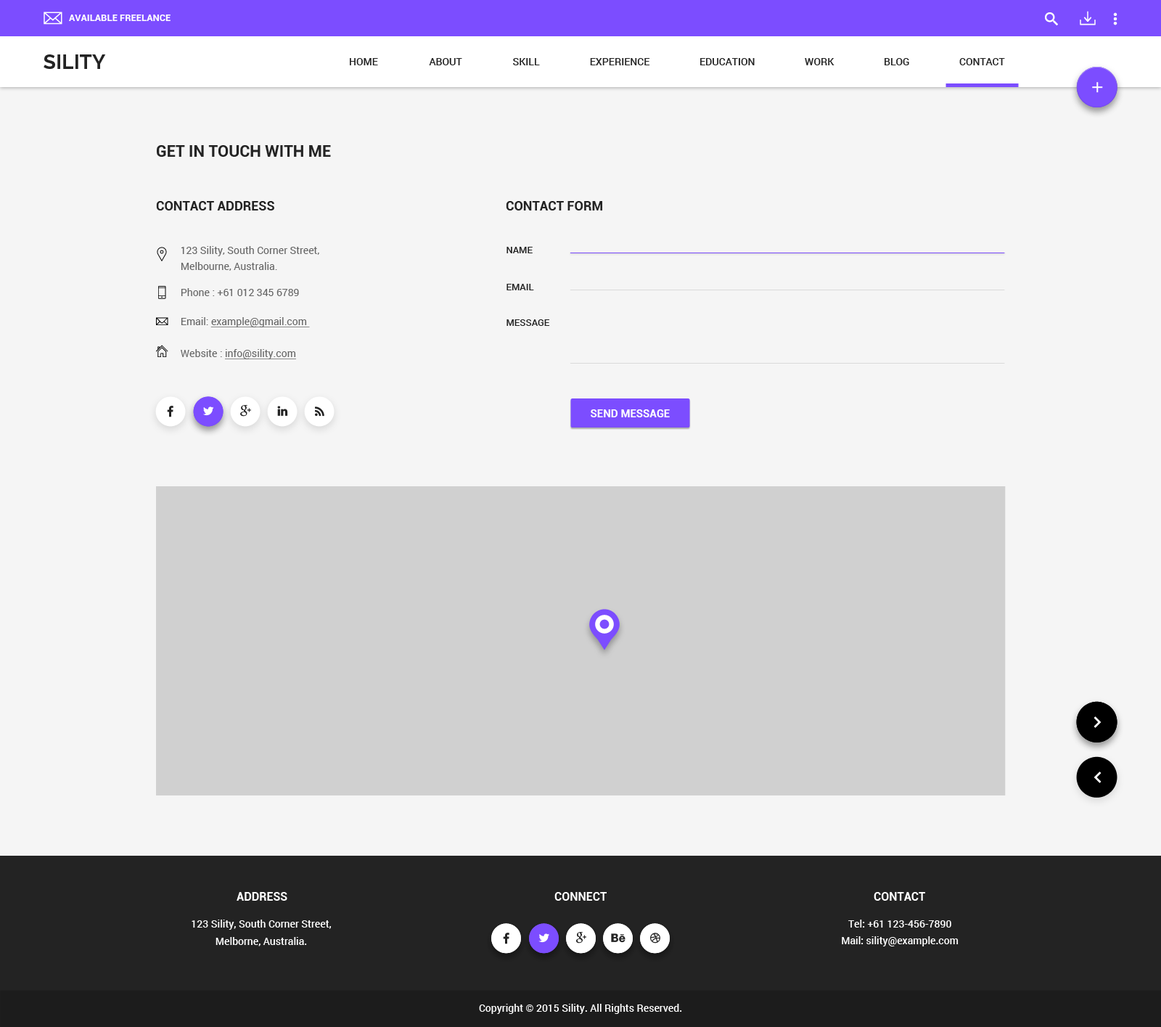
<style>
.page{position:relative;width:1161px;height:1027px;background:#f5f5f5}
.page>*{position:absolute;margin:0}
.t1{font:9.4px "Roboto-Bold";color:#ffffff;text-transform:uppercase}
.t2{font:20.3px "Raleway-Bold";color:#232323}
.t3{font:10.2px "Roboto-Medium";color:#232323;text-transform:uppercase}
.t4{font:16px "Roboto-Bold";color:#232323}
.t5{font:13.1px "Roboto-Bold";color:#232323}
.t6{font:10.2px/16px "Roboto-Regular";color:#666666}
.t7{font:9.4px "Roboto-Medium";color:#232323}
.t8{font:10.2px "Roboto-Regular";color:#666666}
.t9{font:10.2px "Roboto-Regular";color:#666666;text-decoration:underline}
.t10{font:10.9px "Roboto-Bold";color:#ffffff}
.t11{font:11.6px "Roboto-Bold";color:#ffffff;text-transform:uppercase}
.t12{font:10.2px/17.4px "Roboto-Medium";color:#ffffff}
.t13{font:10.2px "Roboto-Medium";color:#ffffff}
</style>
<div class="page">
<p class="t1" style="left:69px;top:15px;width:102px;height:6px">available freelance</p>
<p class="t2" style="left:44px;top:54px;width:62px;height:15px">SILITY</p>
<p class="t3" style="left:350px;top:58px;width:28px;height:7px">home</p>
<p class="t3" style="left:429px;top:58px;width:33px;height:7px">about</p>
<p class="t3" style="left:513px;top:58px;width:27px;height:7px">skill</p>
<p class="t3" style="left:590px;top:58px;width:60px;height:7px">experience</p>
<p class="t3" style="left:700px;top:58px;width:55px;height:7px">education</p>
<p class="t3" style="left:805px;top:58px;width:30px;height:7px">work</p>
<p class="t3" style="left:885px;top:58px;width:24px;height:7px">blog</p>
<p class="t3" style="left:959px;top:58px;width:46px;height:7px">Contact</p>
<p class="t4" style="left:157px;top:145px;width:174px;height:12px">GET IN TOUCH WITH ME</p>
<p class="t5" style="left:156px;top:201px;width:118px;height:9px">CONTACT ADDRESS</p>
<p class="t5" style="left:506px;top:201px;width:96px;height:9px">CONTACT FORM</p>
<p class="t6" style="left:181px;top:246px;width:138px;height:25px">123 Sility, South Corner Street,<br>Melbourne, Australia.</p>
<p class="t7" style="left:507px;top:247px;width:26px;height:6px">NAME</p>
<p class="t8" style="left:181px;top:288px;width:118px;height:8px">Phone : +61 012 345 6789</p>
<p class="t7" style="left:507px;top:284px;width:27px;height:6px">EMAIL</p>
<p class="t9" style="left:181px;top:317px;width:129px;height:10px"><span class="t8">Email: </span>example@gmail.com</p>
<p class="t7" style="left:507px;top:319px;width:43px;height:7px">MESSAGE</p>
<p class="t9" style="left:181px;top:349px;width:115px;height:10px"><span class="t8">Website : </span>info@sility.com</p>
<p class="t10" style="left:591px;top:409px;width:79px;height:8px">SEND MESSAGE</p>
<p class="t11" style="left:237px;top:892px;width:50px;height:9px">Address</p>
<p class="t11" style="left:554px;top:892px;width:53px;height:9px">connect</p>
<p class="t11" style="left:874px;top:892px;width:51px;height:9px">contact</p>
<p class="t12" style="left:192px;top:920px;width:140px;height:26px;text-align:center">123 Sility, South Corner Street,<br>Melborne, Australia.</p>
<p class="t13" style="left:848px;top:920px;width:103px;height:7px">Tel: +61 123-456-7890</p>
<p class="t13" style="left:842px;top:936px;width:117px;height:10px">Mail: sility@example.com</p>
<p class="t13" style="left:479px;top:1004px;width:203px;height:10px">Copyright © 2015 Sility. All Rights Reserved.</p>
</div>
